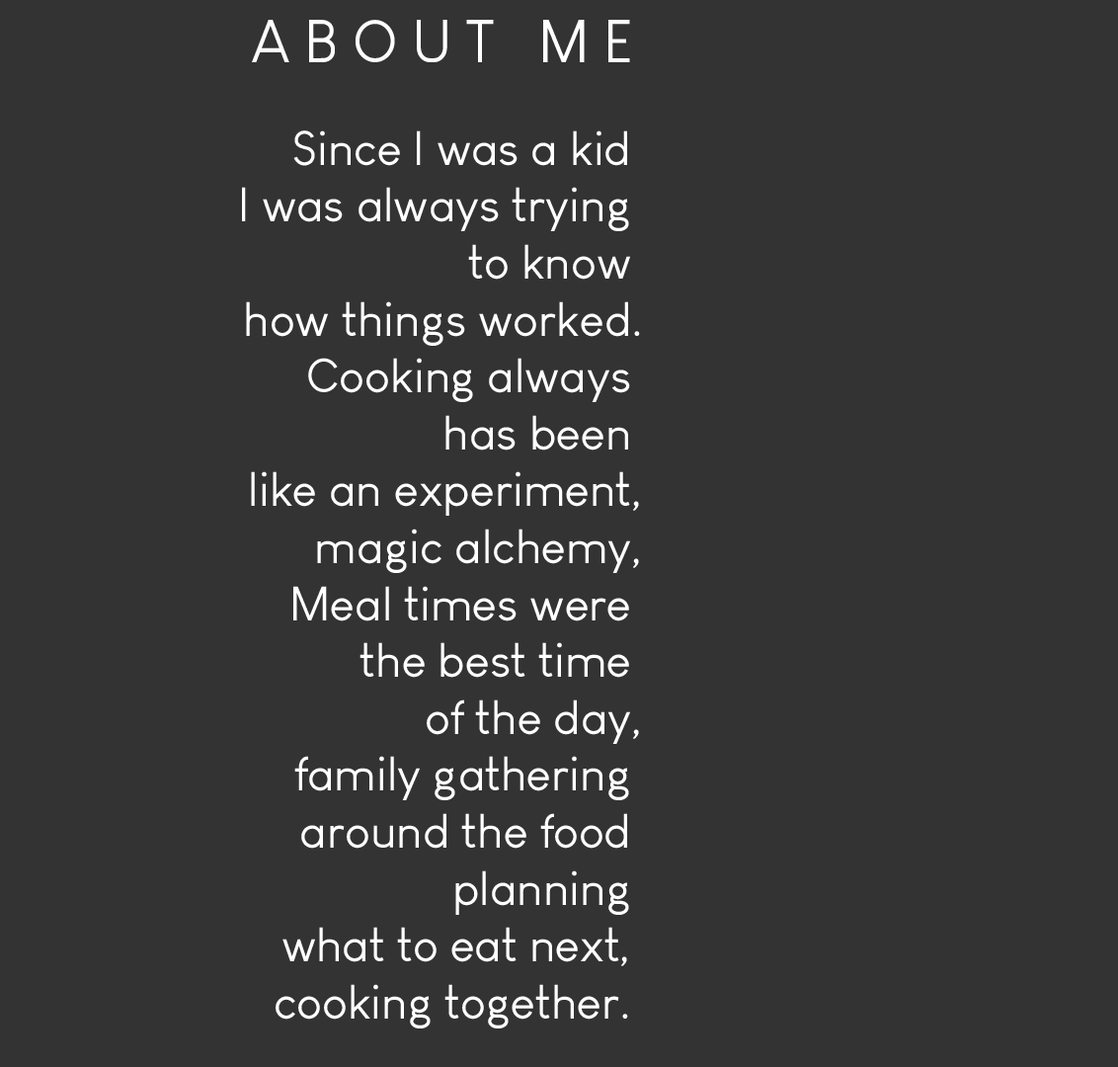
<style>
.page{position:relative;width:1118px;height:1067px;background:#333333}
.page>*{position:absolute;margin:0}
.t1{font:59.3px "LouisGeorgeCafe";color:#ffffff}
.t2{font:47.4px "LouisGeorgeCafe";color:#ffffff}
</style>
<div class="page">
<p class="t1" style="left:252px;top:20px;width:378px;height:42px">A B O U T   M E</p>
<p class="t2" style="left:242px;top:130px;width:398px;height:898px;text-align:right">Since I was a kid <br> I was always trying <br>to know <br>how things worked.<br> Cooking always <br>has been <br>like an experiment,<br> magic alchemy,<br>Meal times were <br>the best time <br> of the day,<br> family gathering <br>around the food <br> planning <br>what to eat next, <br>cooking together.</p>
</div>
